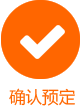
<style>
.page{position:relative;width:80px;height:107px;background:#ff6600}
.page>*{position:absolute;margin:0}
.t1{font:17.1px "MicrosoftYaHei";color:#ff6600;scale:0.97 1}
</style>
<div class="page">
<p class="t1" style="left:9px;top:88px;width:66px;height:18px">确认预定</p>
</div>
